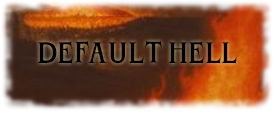
<style>
.page{position:relative;width:274px;height:113px}
.page>*{position:absolute;margin:0}
.t1{font:24px "DevilCandlePERSONALUSE-Regular";letter-spacing:0.025em;color:#000000}
</style>
<div class="page">
<p class="t1" style="left:37px;top:40px;width:200px;height:24px">DEFAULT HELL</p>
</div>
